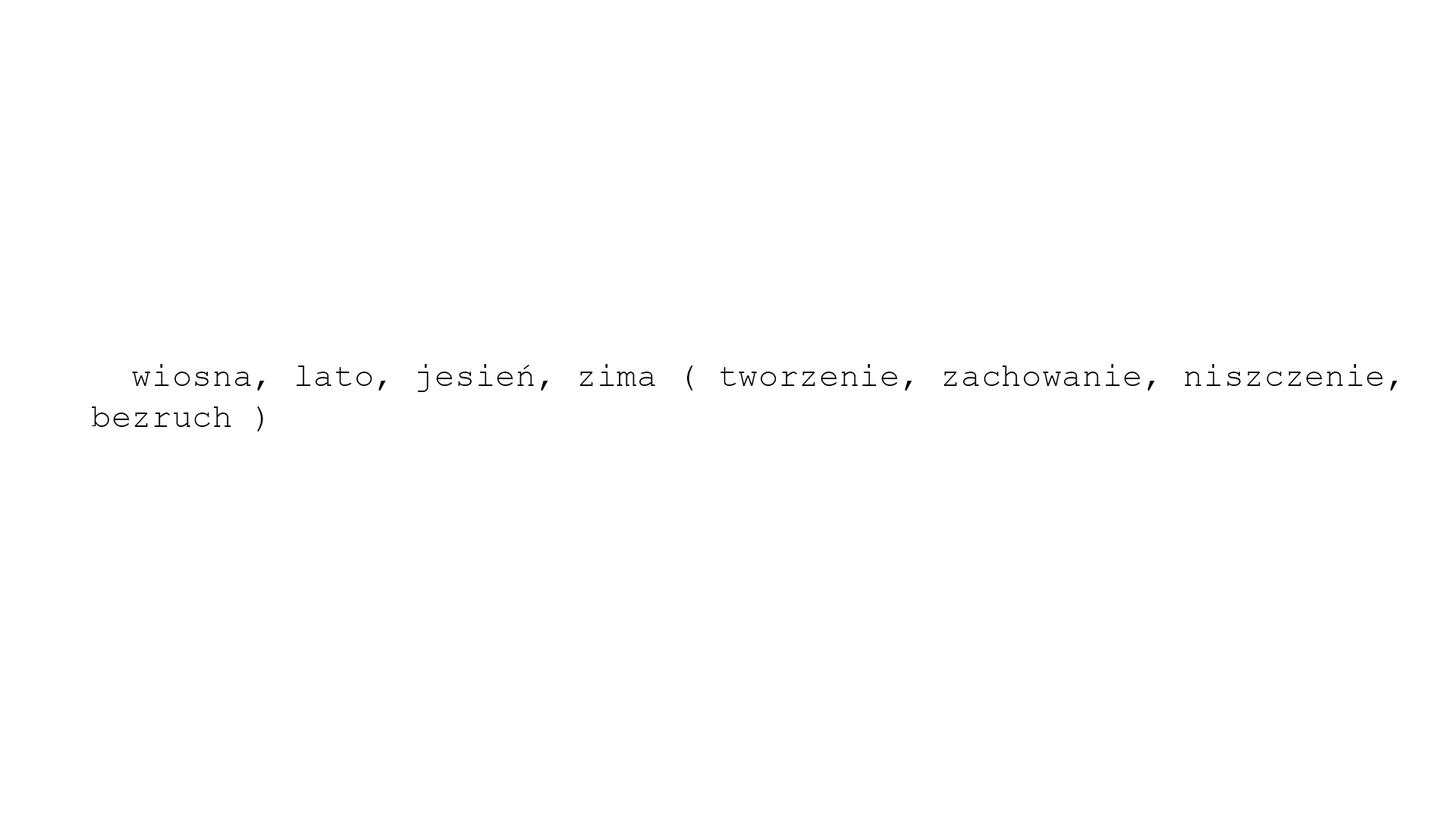
<style>
.page{position:relative;width:1456px;height:819px;background:#ffffff}
.page>*{position:absolute;margin:0}
.t1{font:33.7px "CourierNewPSMT";color:#000000}
</style>
<div class="page">
<p class="t1" style="left:92px;top:364px;width:1306px;height:67px">wiosna, lato, jesień, zima ( tworzenie, zachowanie, niszczenie, <br>bezruch )</p>
</div>
